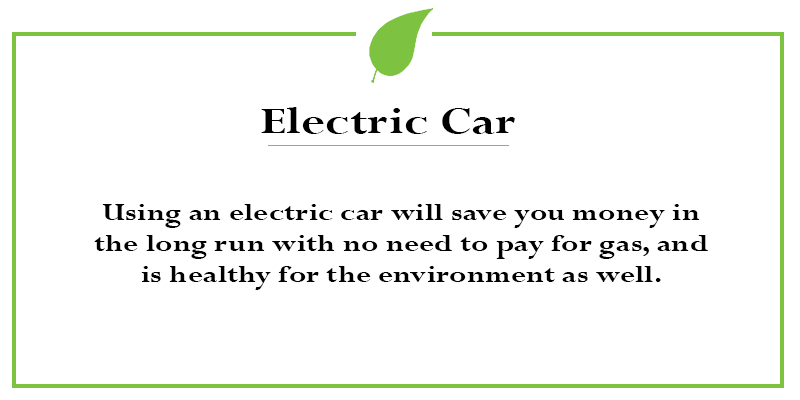
<style>
.page{position:relative;width:800px;height:400px;background:#ffffff}
.page>*{position:absolute;margin:0}
.t1{font:40.8px "Perpetua-Bold";color:#000000;scale:1.26 1}
.t2{font:25.6px "Perpetua-Bold";color:#000000;scale:1.26 1}
</style>
<div class="page">
<p class="t1" style="left:261px;top:107px;width:254px;height:27px">Electric Car</p>
<p class="t2" style="left:94px;top:204px;width:614px;height:86px;text-align:center">Using an electric car will save you money in the long run with no need to pay for gas, and is healthy for the environment as well.</p>
</div>
